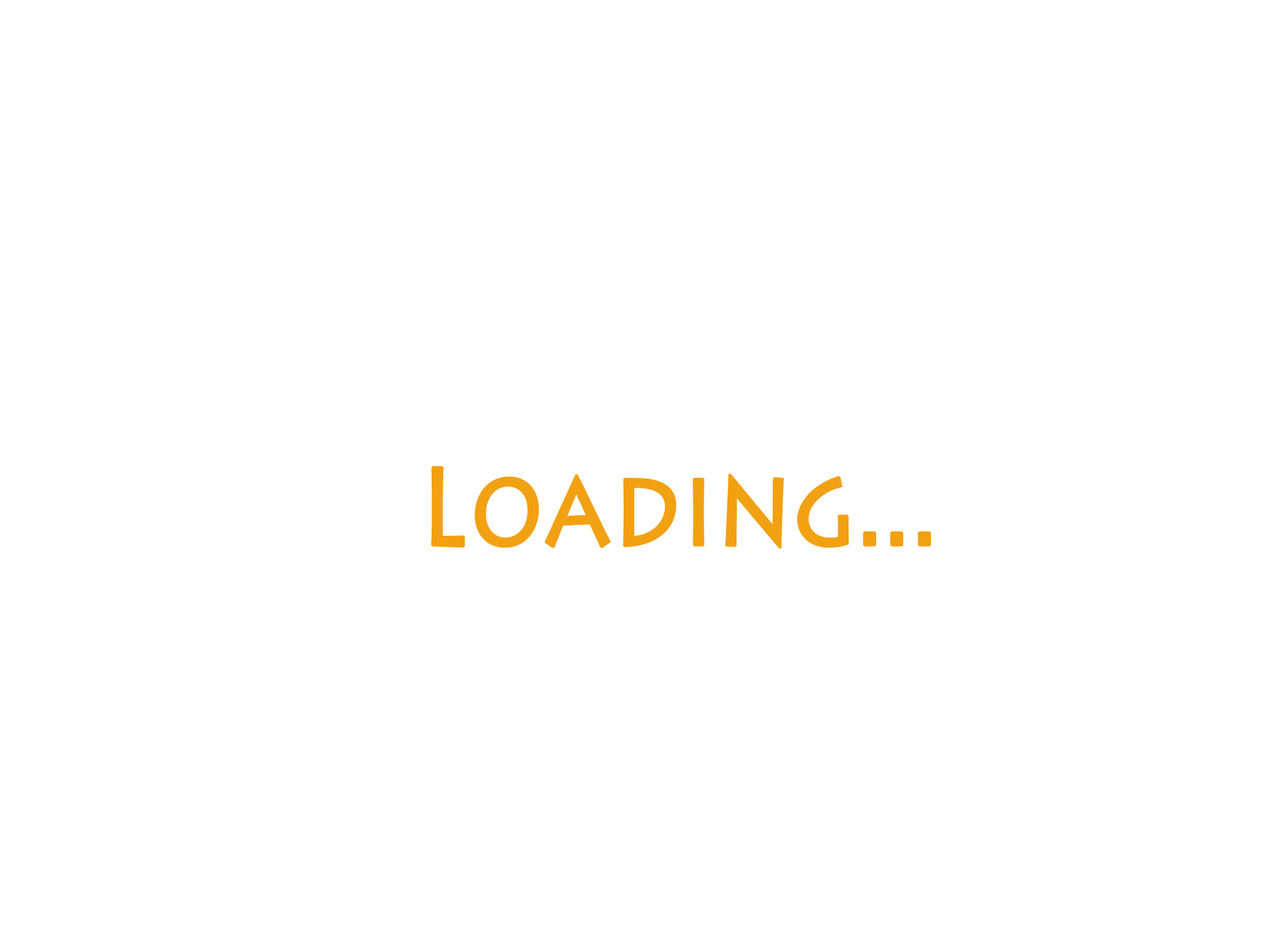
<style>
.page{position:relative;width:1261px;height:946px;background:#ffffff}
.page>*{position:absolute;margin:0}
.t1{font:110.8px "LithosPro-Regular";color:#f2a113;font-weight:bold;scale:0.83 1}
</style>
<div class="page">
<p class="t1" style="left:431px;top:465px;width:500px;height:84px">Loading...</p>
</div>
